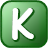
<style>
.page{position:relative;width:48px;height:48px}
.page>*{position:absolute;margin:0}
.t1{font:40px "ComicSansMS-Bold";color:#ffffff}
</style>
<div class="page">
<p class="t1" style="left:12px;top:8px;width:22px;height:32px">K</p>
</div>
